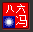
<style>
.page{position:relative;width:33px;height:32px;background:#f20000}
.page>*{position:absolute;margin:0}
.t1{font:10.4px "SimSun";color:#ffffff}
.t2{font:11.7px "SimSun";color:#ffffff}
</style>
<div class="page">
<p class="t1" style="left:6px;top:4px;width:19px;height:9px">八六</p>
<p class="t2" style="left:16px;top:15px;width:11px;height:12px">冯</p>
</div>
